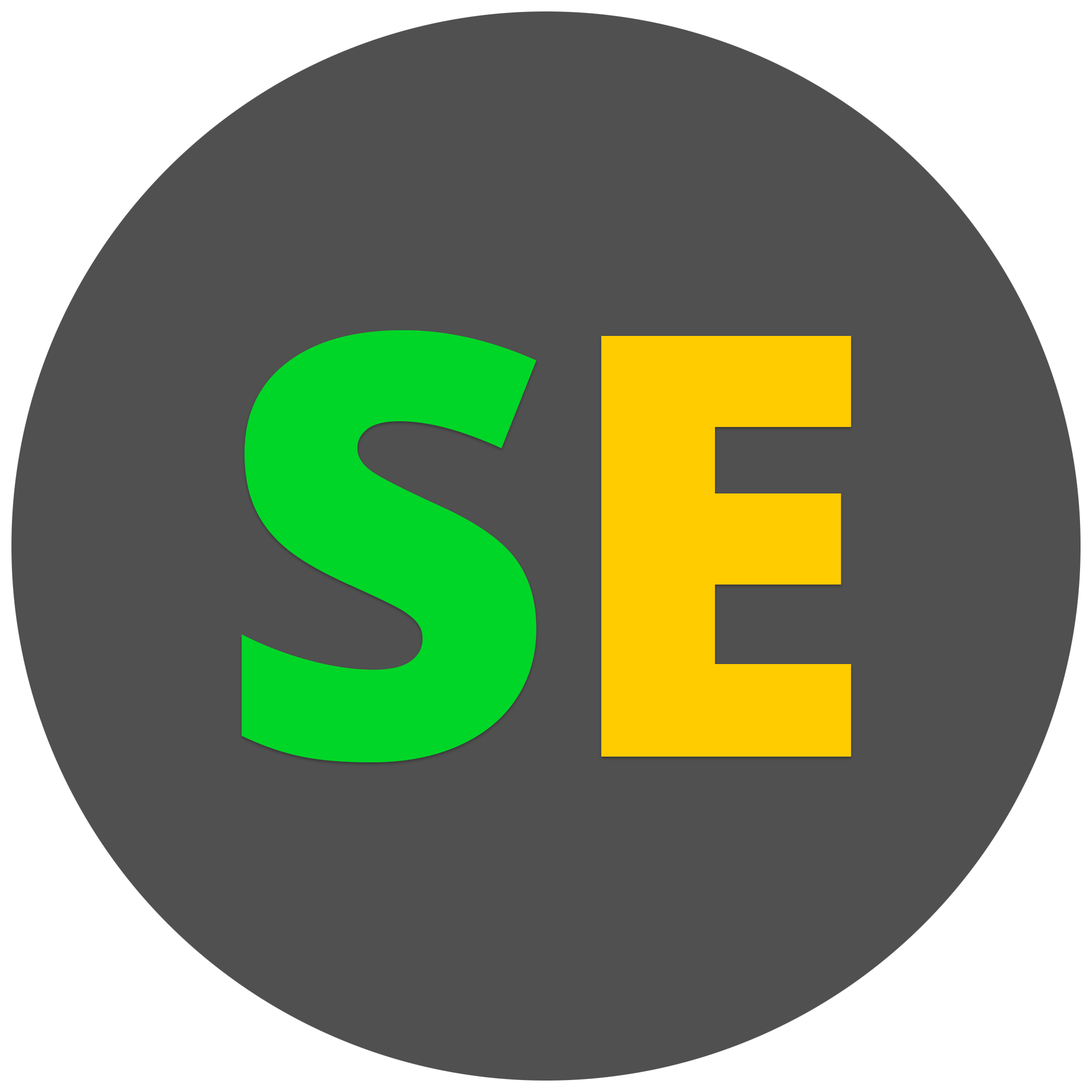
<style>
.page{position:relative;width:1092px;height:1092px;background:#505050}
.page>*{position:absolute;margin:0}
.t1{font:589.3px "OpenSans-Extrabold";color:#00d628}
.t2{font:589.3px "OpenSans-Extrabold";color:#ffcc00}
</style>
<div class="page">
<p class="t1" style="left:241px;top:330px;width:610px;height:432px">S<span class="t2">E</span></p>
</div>
